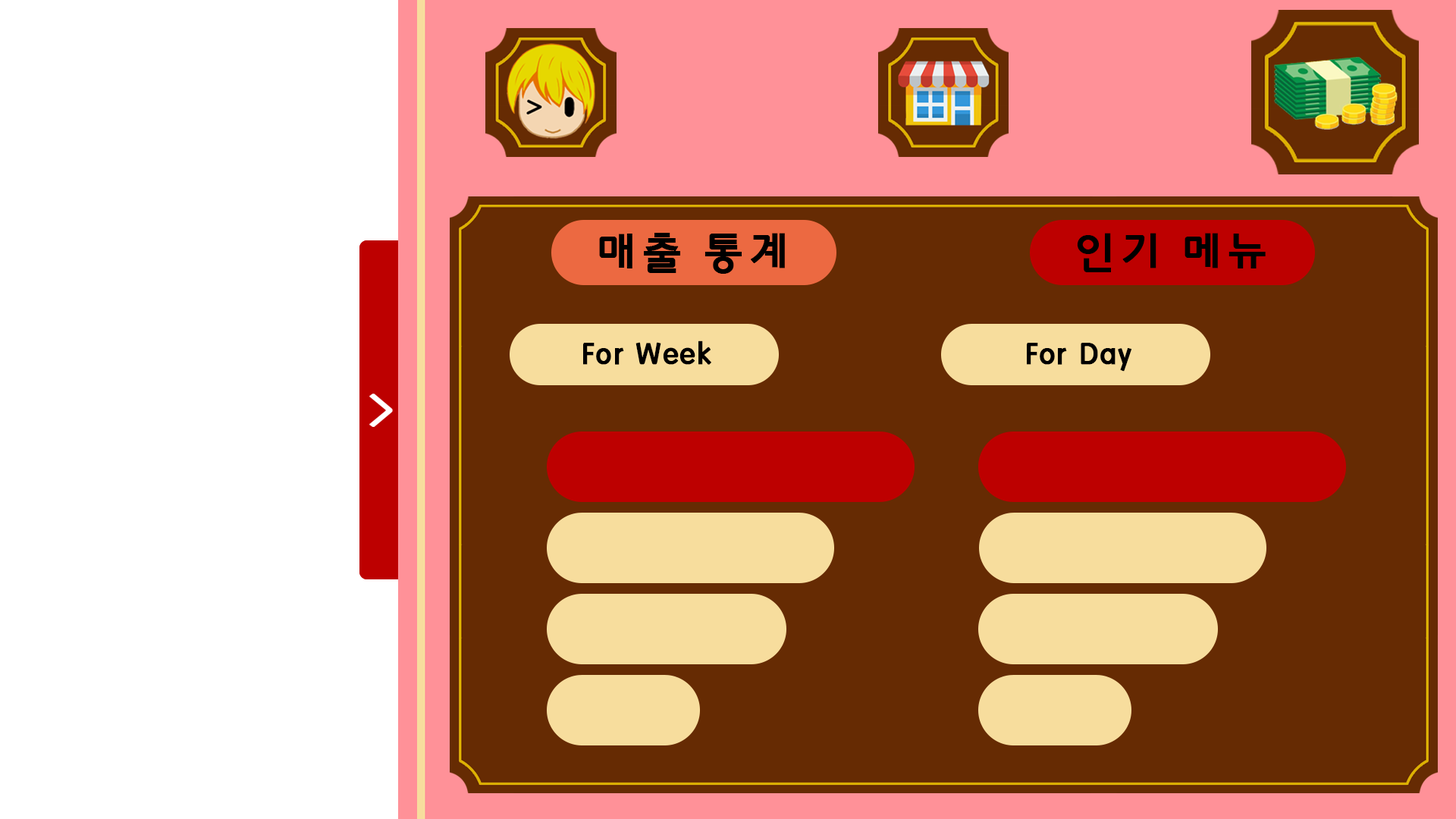
<style>
.page{position:relative;width:1456px;height:819px;background:#662b03}
.page>*{position:absolute;margin:0}
.t1{font:44.2px "HYkanB";color:#000000;font-weight:bold}
.t2{font:31.7px "HYkanB";color:#000000;font-weight:bold}
</style>
<div class="page">
<p class="t1" style="left:599px;top:233px;width:186px;height:41px">매출 통계</p>
<p class="t1" style="left:1077px;top:233px;width:189px;height:39px">인기 메뉴</p>
<p class="t2" style="left:583px;top:340px;width:128px;height:25px">For Week</p>
<p class="t2" style="left:1027px;top:343px;width:104px;height:29px">For Day</p>
</div>
